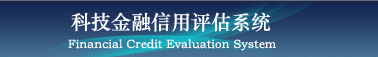
<style>
.page{position:relative;width:378px;height:57px}
.page>*{position:absolute;margin:0}
.t1{font:20px "STZhongsong";color:#ffffff}
.t2{font:12px "STZhongsong";color:#ffffff}
</style>
<div class="page">
<p class="t1" style="left:71px;top:12px;width:200px;height:20px">科技金融信用评估系统</p>
<p class="t2" style="left:68px;top:39px;width:208px;height:12px">Financial Credit Evaluation System</p>
</div>
